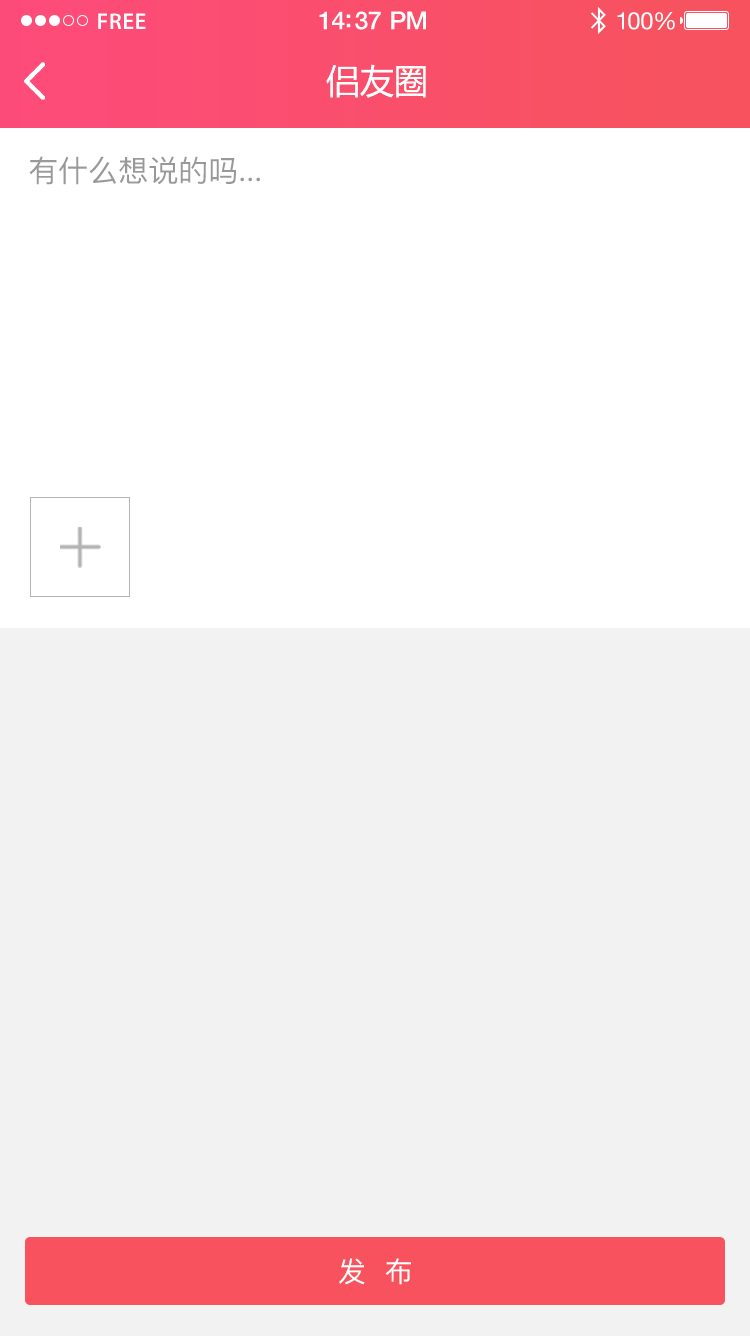
<style>
.page{position:relative;width:750px;height:1336px;background:#f2f2f2}
.page>*{position:absolute;margin:0}
.t1{font:23px "MyriadPro-Semibold";letter-spacing:0.02em;color:#ffffff}
.t2{font:25px "HelveticaNeue-Medium";letter-spacing:-0.02em;color:#ffffff}
.t3{font:24px "HelveticaNeue";letter-spacing:-0.02em;color:#ffffff}
.t4{font:34px "MicrosoftYaHei";color:#ffffff;text-transform:uppercase}
.t5{font:30px "PingFang-SC-Medium";color:#999999;text-transform:uppercase}
.t6{font:28px "PingFang-SC-Medium";color:#ffffff;text-transform:uppercase}
</style>
<div class="page">
<p class="t1" style="left:98px;top:13px;width:48px;height:16px">FREE</p>
<p class="t2" style="left:319px;top:11px;width:107px;height:19px">14:37 PM</p>
<p class="t3" style="left:617px;top:12px;width:58px;height:18px">100%</p>
<p class="t4" style="left:326px;top:64px;width:100px;height:34px">侣友圈</p>
<p class="t5" style="left:29px;top:156px;width:231px;height:29px">有什么想说的吗...</p>
<p class="t6" style="left:339px;top:1258px;width:72px;height:27px">发  布</p>
</div>
